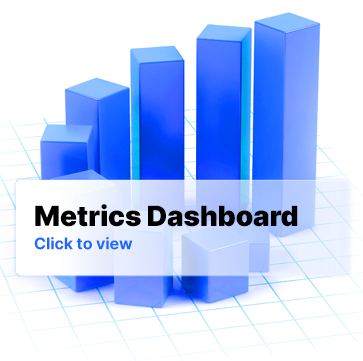
<style>
.page{position:relative;width:363px;height:361px;background:#ffffff}
.page>*{position:absolute;margin:0}
.t1{font:28px "Inter-Black";letter-spacing:-0.005em;color:#000000}
.t2{font:16px "Inter-Bold";letter-spacing:-0.005em;color:#1a6aff}
</style>
<div class="page">
<p class="t1" style="left:35px;top:204px;width:263px;height:23px">Metrics Dashboard</p>
<p class="t2" style="left:34px;top:237px;width:99px;height:13px">Click to view</p>
</div>
